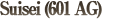
<style>
.page{position:relative;width:118px;height:19px;background:#ffffff}
.page>*{position:absolute;margin:0}
.t1{font:18px "RyuminPro-ExBold";letter-spacing:-0.08em;color:#4a3f32;font-weight:bold;scale:0.9 1}
</style>
<div class="page">
<p class="t1" style="left:0px;top:0px;width:102px;height:19px">Suisei (601 AG)</p>
</div>
